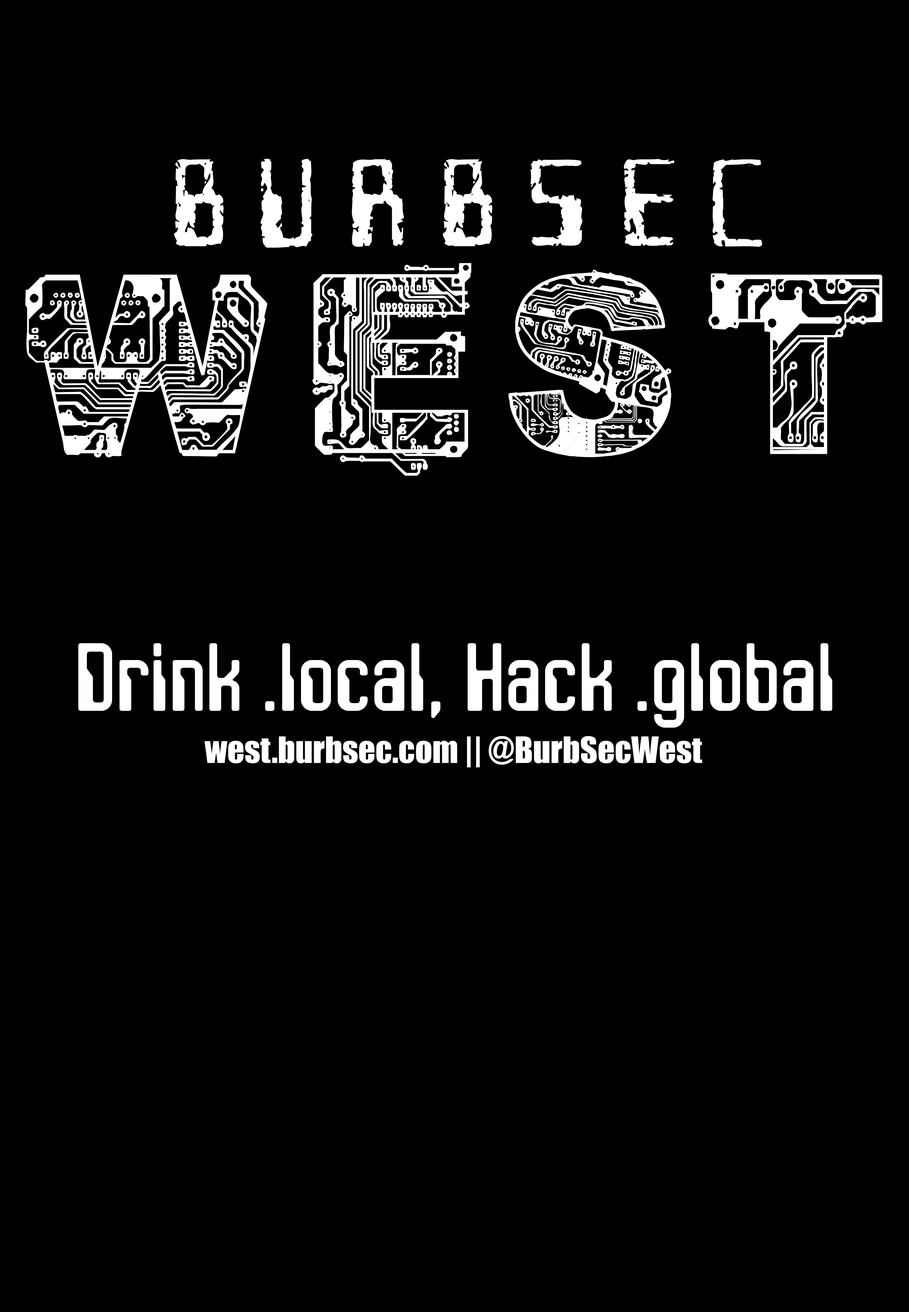
<style>
.page{position:relative;width:909px;height:1312px;background:#000000}
.page>*{position:absolute;margin:0}
.t1{font:246.8px "CFCircuitElectrique-Regular";letter-spacing:0.12em;color:#ffffff}
.t2{font:96.7px "JLSSpaceGothic-CNC";color:#ffffff}
.t3{font:33.7px "Impact";color:#ffffff}
</style>
<div class="page">
<p class="t1" style="left:25px;top:263px;width:857px;height:213px">WEST</p>
<p class="t2" style="left:78px;top:643px;width:754px;height:85px">Drink .local, Hack .global</p>
<p class="t3" style="left:204px;top:736px;width:498px;height:32px">west.burbsec.com || @BurbSecWest</p>
</div>
